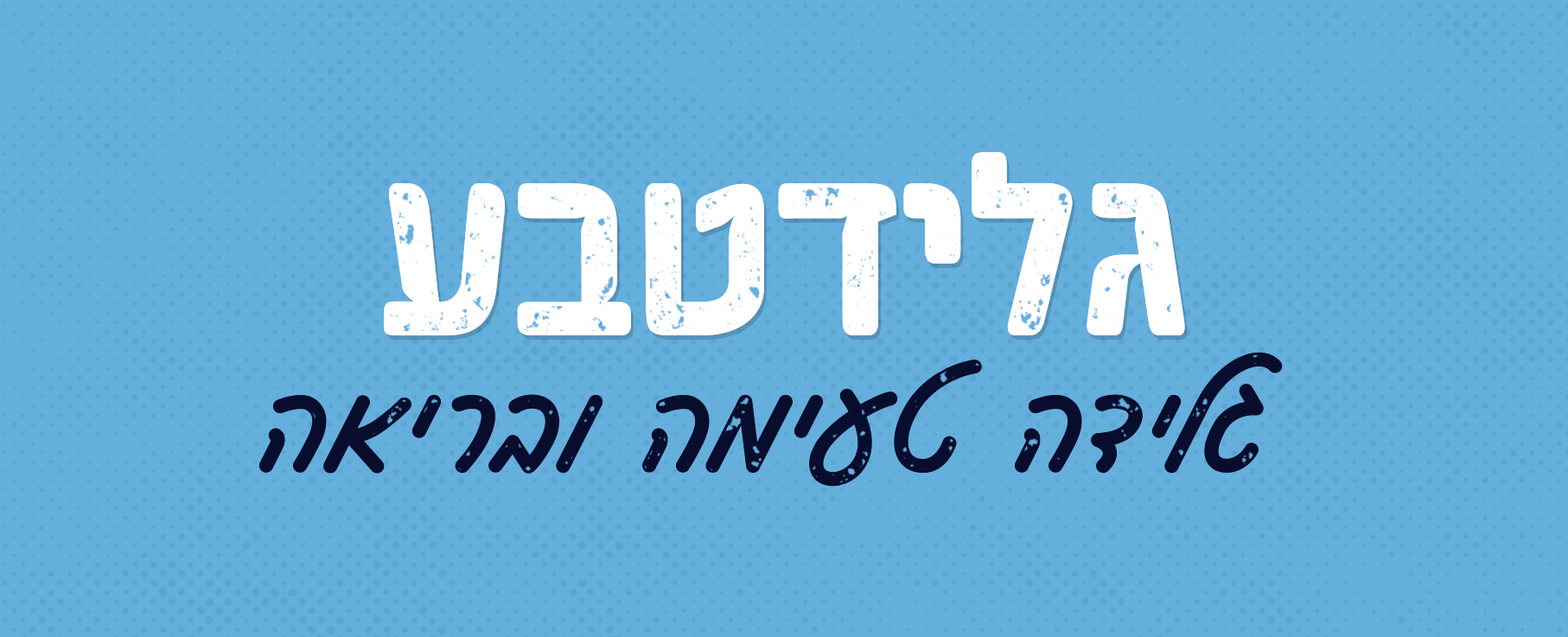
<style>
.page{position:relative;width:1568px;height:637px;background:#65afdd}
.page>*{position:absolute;margin:0}
.t1{font:197.8px "ElronJimboryRoundBold";letter-spacing:-0.04em;color:#ffffff}
.t2{font:91.7px "ElronSupernovaMedium";color:#080d2d}
</style>
<div class="page">
<p class="t1" style="left:384px;top:152px;width:801px;height:184px">גלידטבע</p>
<p class="t1" style="left:384px;top:152px;width:801px;height:184px">גלידטבע</p>
<p class="t2" style="left:259px;top:352px;width:1024px;height:135px">גלידה טעימה ובריאה</p>
<p class="t2" style="left:259px;top:352px;width:1024px;height:135px">גלידה טעימה ובריאה</p>
</div>
